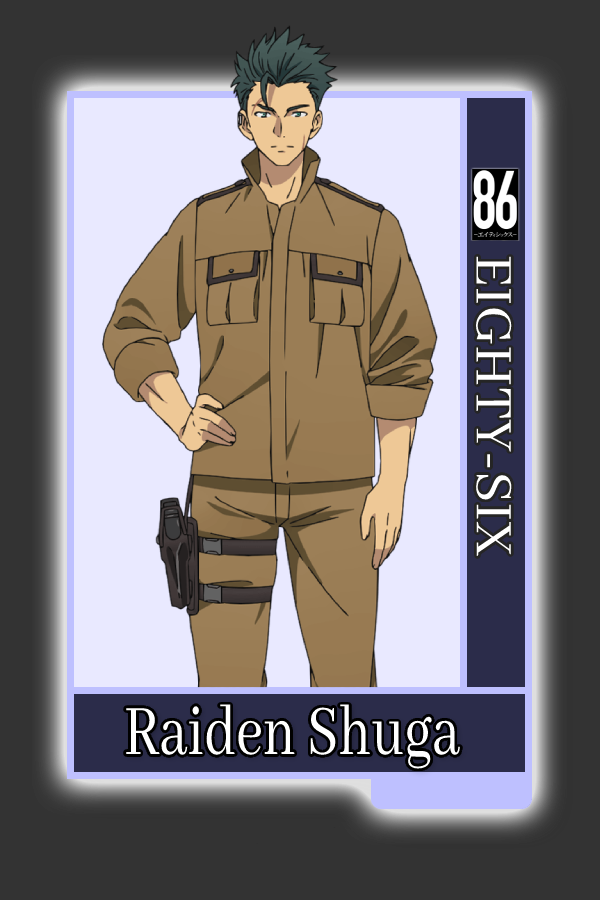
<style>
.page{position:relative;width:600px;height:900px;background:#333333}
.page>*{position:absolute;margin:0}
.t1{font:58.2px "AbhayaLibre-Regular";color:#ffffff}
.t2{font:78.1px "AbhayaLibre-Regular";color:#ffffff;scale:0.76 1}
</style>
<div class="page">
<p class="t1" style="left:476px;top:256px;width:36px;height:300px;rotate:90deg">EIGHTY-SIX</p>
<p class="t2" style="left:126px;top:704px;width:334px;height:65px">Raiden Shuga</p>
</div>
